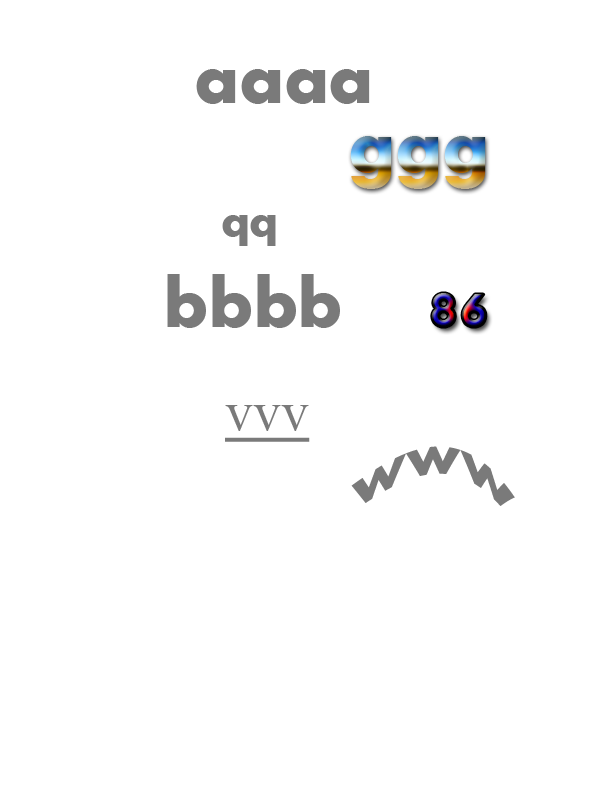
<style>
.page{position:relative;width:598px;height:801px;background:#ffffff}
.page>*{position:absolute;margin:0}
.t1{font:72px "Aharoni-Bold";color:#7a7a7a}
.t2{font:76px "Aharoni-Bold"}
.t3{font:46px "Aharoni-Bold";color:#7a7a7a}
.t4{font:72px "Aharoni-Bold"}
.t5{font:56px "David";color:#7a7a7a;text-decoration:underline}
.t6{font:60px "Aharoni-Bold";color:#7a7a7a}
</style>
<div class="page">
<p class="t1" style="left:196px;top:69px;width:174px;height:35px">aaaa</p>
<p class="t2" style="left:350px;top:136px;width:136px;height:53px">ggg</p>
<p class="t3" style="left:222px;top:215px;width:54px;height:31px">qq</p>
<p class="t1" style="left:167px;top:274px;width:173px;height:54px">bbbb</p>
<p class="t4" style="left:431px;top:293px;width:55px;height:34px">86</p>
<p class="t5" style="left:225px;top:405px;width:85px;height:37px">vvv</p>
<p class="t6" style="left:351px;top:446px;width:164px;height:60px">www</p>
</div>
